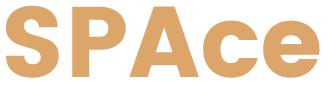
<style>
.page{position:relative;width:331px;height:85px;background:#ffffff}
.page>*{position:absolute;margin:0}
.t1{font:100px "Poppins-Bold";color:#dca56a}
</style>
<div class="page">
<p class="t1" style="left:6px;top:5px;width:314px;height:73px">SPAce</p>
</div>
